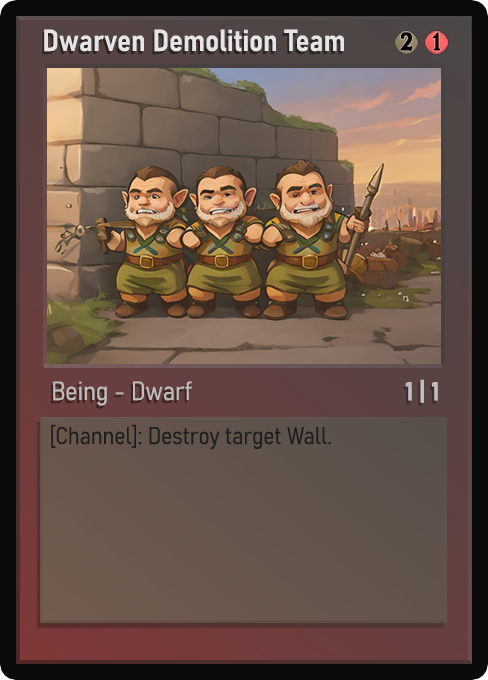
<style>
.page{position:relative;width:488px;height:680px}
.page>*{position:absolute;margin:0}
.t1{font:30px "Bahnschrift-SemiBoldSemiCondensed";color:#f2f2f2;font-weight:bold}
.t2{font:25px "WTRRoycroft";color:#000000;font-weight:bold;scale:1.09 1}
.t3{font:26px "Bahnschrift-LightSemiCondensed";color:#c8c8c8;font-weight:bold}
.t4{font:26px "Bahnschrift-BoldSemiCondensed";color:#c1bdbd;font-weight:bold}
.t5{font:24px "Bahnschrift-LightSemiCondensed";color:#1e1e1e;font-weight:bold}
</style>
<div class="page">
<p class="t1" style="left:44px;top:29px;width:300px;height:23px;opacity:0.9">Dwarven Demolition Team</p>
<p class="t2" style="left:400px;top:32px;width:13px;height:19px">2</p>
<p class="t2" style="left:432px;top:32px;width:9px;height:19px">1</p>
<p class="t3" style="left:53px;top:381px;width:139px;height:25px;opacity:0.9">Being - Dwarf</p>
<p class="t4" style="left:405px;top:379px;width:33px;height:24px">1 | 1</p>
<p class="t5" style="left:51px;top:424px;width:280px;height:26px">[Channel]: Destroy target Wall.</p>
</div>
